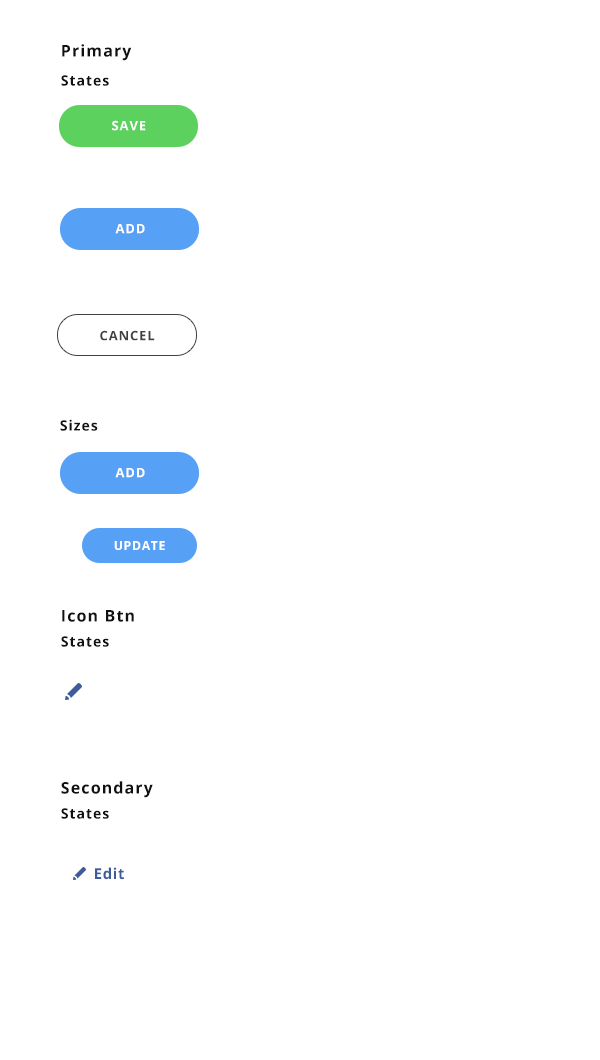
<style>
.page{position:relative;width:600px;height:1060px;background:#ffffff}
.page>*{position:absolute;margin:0}
.t1{font:16px "OpenSans-Bold";letter-spacing:0.07em;color:#111111}
.t2{font:14px "OpenSans-Bold";letter-spacing:0.07em;color:#111111}
.t3{font:13px "OpenSans-Bold";letter-spacing:0.07em;color:#ffffff}
.t4{font:13px "OpenSans-Bold";letter-spacing:0.07em;color:#404040}
.t5{font:12.5px "OpenSans-Bold";letter-spacing:0.05em;color:#ffffff}
.t6{font:15px "OpenSans-Bold";letter-spacing:0.05em;color:#3d5c99}
</style>
<div class="page">
<p class="t1" style="left:62px;top:44px;width:70px;height:17px">Primary</p>
<p class="t2" style="left:61px;top:75px;width:48px;height:11px">States</p>
<p class="t3" style="left:112px;top:120px;width:34px;height:11px">SAVE</p>
<p class="t3" style="left:115px;top:224px;width:30px;height:10px">ADD</p>
<p class="t4" style="left:100px;top:330px;width:55px;height:11px">CANCEL</p>
<p class="t2" style="left:60px;top:419px;width:38px;height:12px">Sizes</p>
<p class="t3" style="left:115px;top:468px;width:30px;height:10px">ADD</p>
<p class="t5" style="left:114px;top:541px;width:51px;height:9px">UPDATE</p>
<p class="t1" style="left:62px;top:610px;width:72px;height:12px">Icon Btn</p>
<p class="t2" style="left:61px;top:636px;width:48px;height:11px">States</p>
<p class="t1" style="left:61px;top:781px;width:92px;height:17px">Secondary</p>
<p class="t2" style="left:61px;top:808px;width:48px;height:11px">States</p>
<p class="t6" style="left:95px;top:867px;width:29px;height:13px">Edit</p>
</div>
